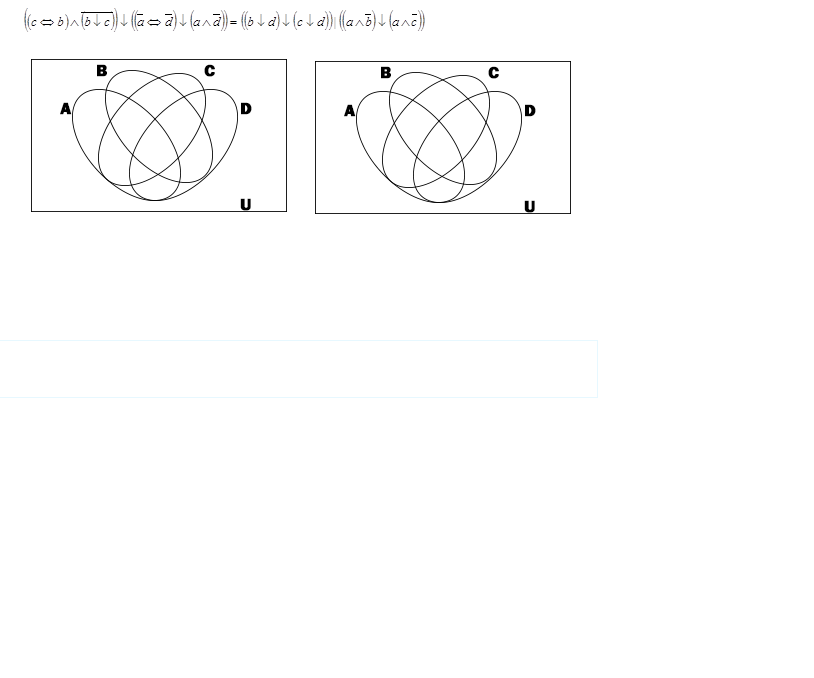
<style>
.page{position:relative;width:814px;height:678px;background:#ffffff}
.page>*{position:absolute;margin:0}
.t1{font:16.8px "FranklinGothic-Heavy";color:#000000;font-weight:bold}
</style>
<div class="page">
<p class="t1" style="left:60px;top:64px;width:192px;height:147px;text-align:right">B   C<br>  <br>A     D<br><br><br><br><br>     U</p>
<p class="t1" style="left:344px;top:66px;width:192px;height:147px;text-align:right">B   C<br>  <br>A     D<br><br><br><br><br>     U</p>
</div>
